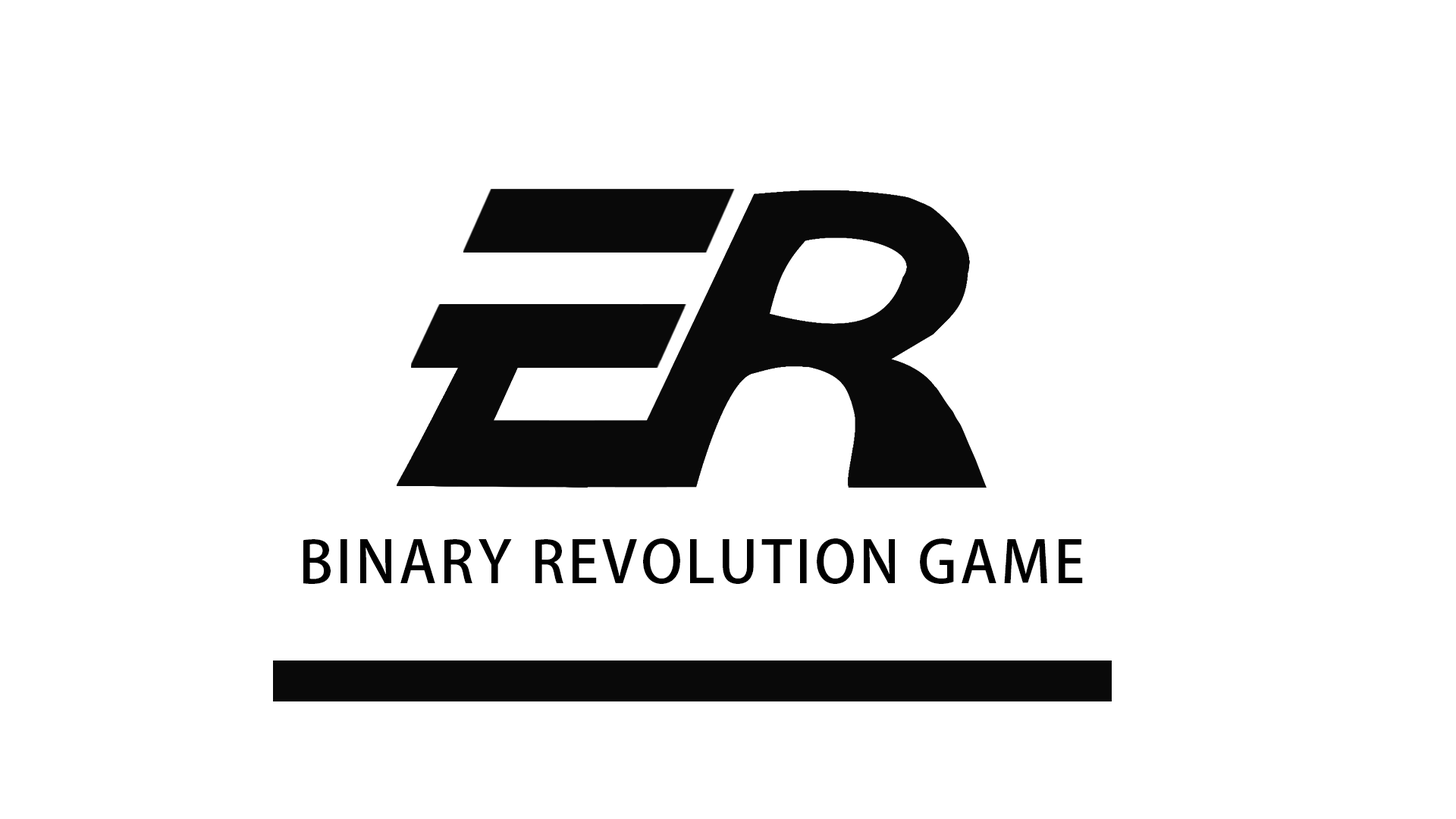
<style>
.page{position:relative;width:1456px;height:819px;background:#ffffff}
.page>*{position:absolute;margin:0}
.t1{font:56.9px "AdobeHeitiStd-Regular";letter-spacing:0.06em;color:#000000}
</style>
<div class="page">
<p class="t1" style="left:303px;top:538px;width:592px;height:46px">BINARY REVOLUTION</p>
<p class="t1" style="left:920px;top:538px;width:163px;height:46px">GAME</p>
</div>
